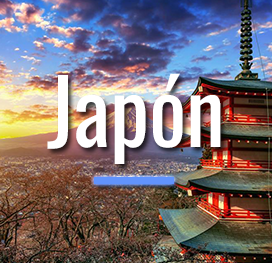
<style>
.page{position:relative;width:272px;height:263px}
.page>*{position:absolute;margin:0}
.t1{font:88.9px "Oswald-Regular";color:#ffffff}
</style>
<div class="page">
<p class="t1" style="left:47px;top:73px;width:174px;height:91px">Japón</p>
</div>
